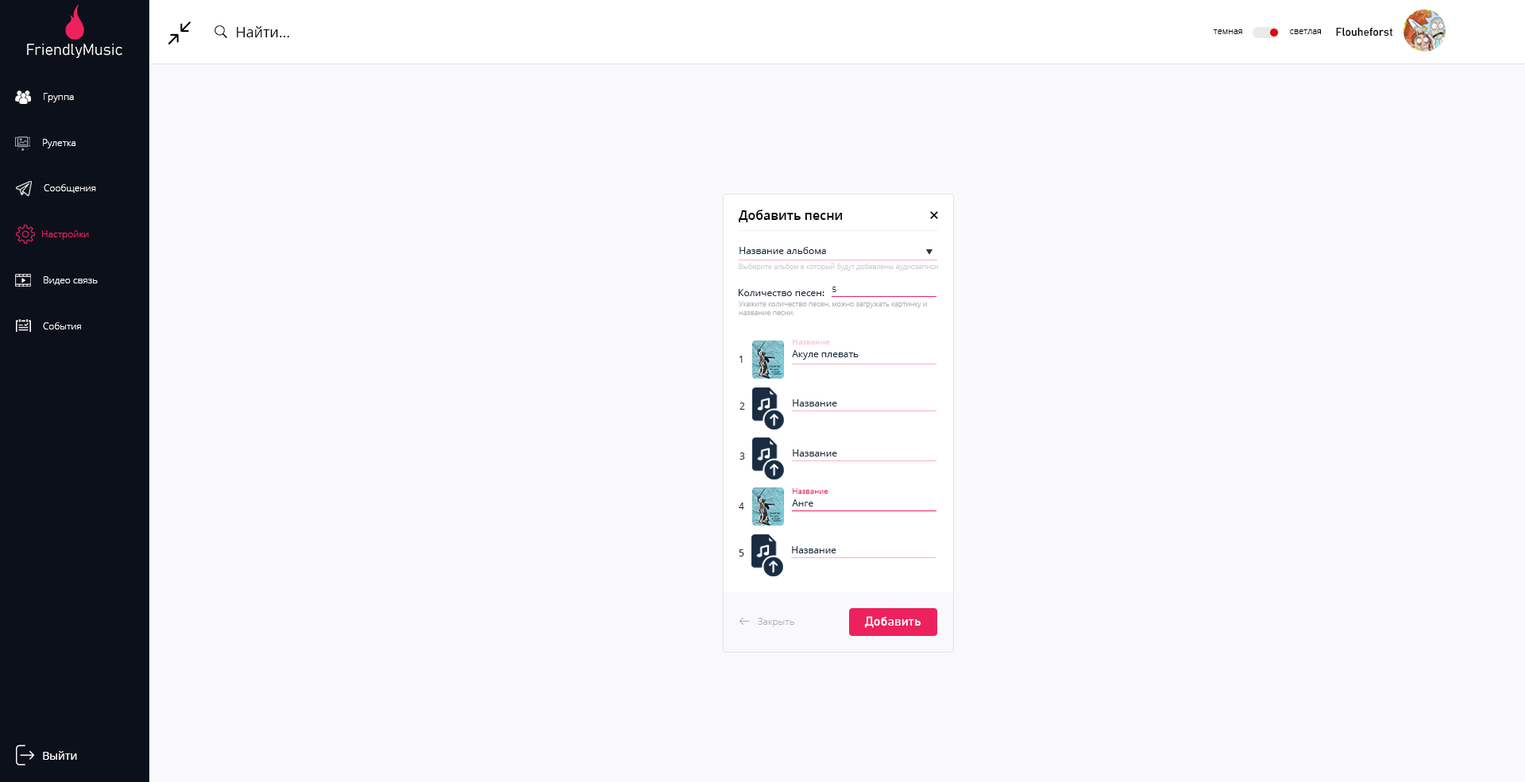
<style>
.page{position:relative;width:1525px;height:782px;background:#f9f9fb}
.page>*{position:absolute;margin:0}
.t1{font:14.3px "OpenSans";color:#000000}
.t2{font:8.7px "OpenSans-Light";color:#000000}
.t3{font:11.1px "Bahnschrift";color:#000000}
.t4{font:9.5px "OpenSans-Light";color:#ffffff}
.t5{font:12.7px "OpenSans-Semibold";color:#000000}
.t6{font:9.5px "OpenSans-Light";color:#ed215e}
.t7{font:9.5px "OpenSans";color:#1a2c42}
.t8{font:7.1px "OpenSans-Light";color:#cdcdcd}
.t9{font:7.9px "OpenSans-Light";color:#1a2c42}
.t10{font:7.1px "OpenSans-Light";color:#afafb7}
.t11{font:7.9px "OpenSans";color:#f9c5d0}
.t12{font:7.9px "OpenSans-Light";color:#ed215e}
.t13{font:9.5px "OpenSans-Light";color:#afafb7}
.t14{font:12.7px "Bahnschrift";color:#ffffff}
.t15{font:11.1px "OpenSans";color:#ffffff}
</style>
<div class="page">
<p class="t1" style="left:237px;top:26px;width:52px;height:11px">Найти...</p>
<p class="t2" style="left:1213px;top:29px;width:29px;height:5px">темная</p>
<p class="t2" style="left:1290px;top:29px;width:31px;height:5px">светлая</p>
<p class="t3" style="left:1336px;top:27px;width:57px;height:10px">Flouheforst</p>
<p class="t4" style="left:44px;top:93px;width:30px;height:9px">Группа</p>
<p class="t4" style="left:43px;top:139px;width:32px;height:9px">Рулетка</p>
<p class="t4" style="left:44px;top:184px;width:52px;height:9px">Сообщения</p>
<p class="t5" style="left:738px;top:210px;width:104px;height:12px">Добавить песни</p>
<p class="t6" style="left:42px;top:230px;width:47px;height:10px">Настройки</p>
<p class="t7" style="left:739px;top:247px;width:87px;height:7px">Название альбома</p>
<p class="t8" style="left:738px;top:263px;width:200px;height:8px">Выберите альбом в который будут добавлены аудиозаписи</p>
<p class="t4" style="left:44px;top:276px;width:54px;height:9px">Видео связь</p>
<p class="t7" style="left:738px;top:289px;width:86px;height:7px">Количество песен:</p>
<p class="t9" style="left:832px;top:287px;width:4px;height:5px">5</p>
<p class="t10" style="left:738px;top:301px;width:189px;height:14px">Укажите количество песен, можно загружать картинку и название песни.</p>
<p class="t4" style="left:43px;top:322px;width:38px;height:8px">События</p>
<p class="t11" style="left:792px;top:339px;width:38px;height:6px">Название</p>
<p class="t7" style="left:792px;top:350px;width:66px;height:10px">Акуле плевать</p>
<p class="t7" style="left:739px;top:356px;width:3px;height:7px">1</p>
<p class="t7" style="left:792px;top:399px;width:45px;height:8px">Название</p>
<p class="t7" style="left:739px;top:403px;width:6px;height:7px">2</p>
<p class="t7" style="left:792px;top:449px;width:45px;height:8px">Название</p>
<p class="t7" style="left:739px;top:453px;width:6px;height:7px">3</p>
<p class="t12" style="left:792px;top:488px;width:36px;height:6px">Название</p>
<p class="t7" style="left:738px;top:503px;width:6px;height:7px">4</p>
<p class="t7" style="left:792px;top:499px;width:21px;height:8px">Анге</p>
<p class="t7" style="left:738px;top:549px;width:6px;height:8px">5</p>
<p class="t7" style="left:792px;top:546px;width:44px;height:7px">Название</p>
<p class="t13" style="left:758px;top:618px;width:36px;height:9px">Закрыть</p>
<p class="t14" style="left:864px;top:616px;width:56px;height:12px">Добавить</p>
<p class="t15" style="left:43px;top:751px;width:34px;height:9px">Выйти</p>
</div>
